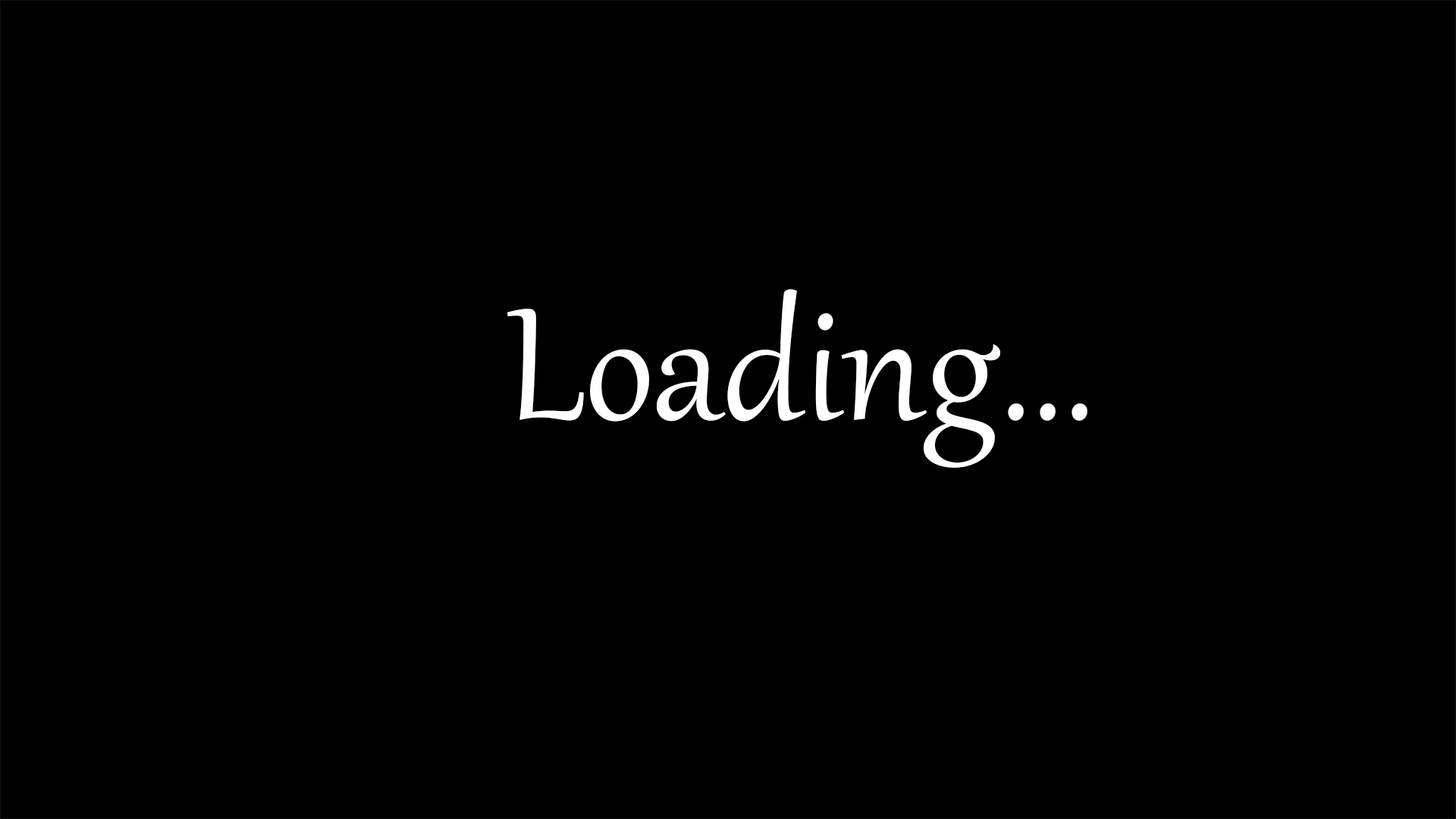
<style>
.page{position:relative;width:1456px;height:819px;background:#000000}
.page>*{position:absolute;margin:0}
.t1{font:194.9px "Gabriola";color:#ffffff}
</style>
<div class="page">
<p class="t1" style="left:507px;top:289px;width:580px;height:179px">Loading...</p>
</div>
